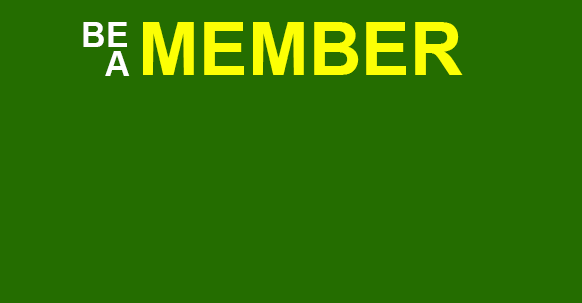
<style>
.page{position:relative;width:582px;height:303px;background:#246d00}
.page>*{position:absolute;margin:0}
.t1{font:33.6px "Arial-BoldMT";color:#ffffff}
.t2{font:72.7px "Arial-BoldMT";color:#fcff04}
</style>
<div class="page">
<p class="t1" style="left:83px;top:22px;width:44px;height:25px">BE</p>
<p class="t2" style="left:143px;top:22px;width:320px;height:53px">MEMBER</p>
<p class="t1" style="left:105px;top:51px;width:25px;height:25px">A</p>
</div>
